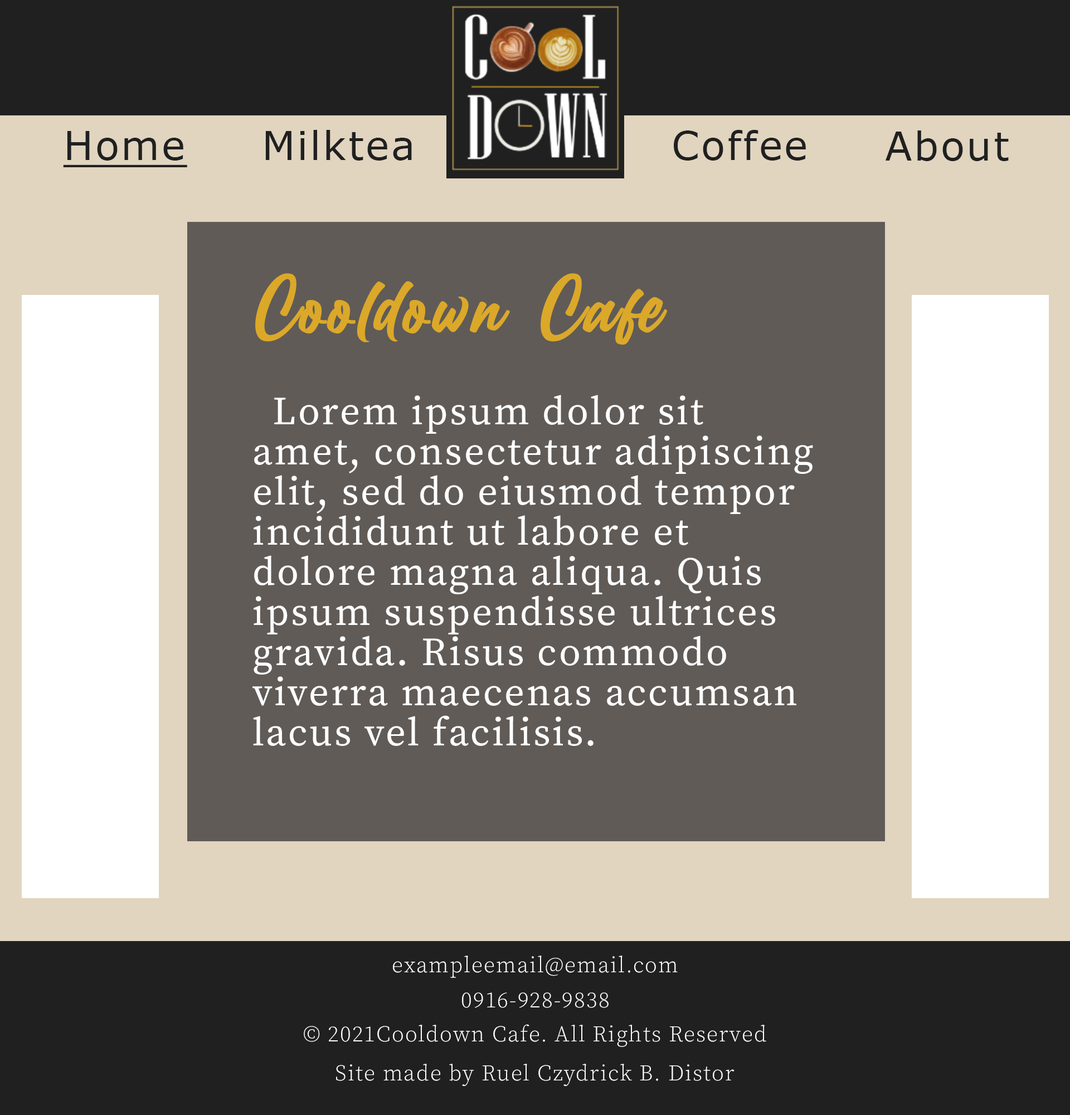
<style>
.page{position:relative;width:1070px;height:1115px;background:#605b57}
.page>*{position:absolute;margin:0}
.t1{font:39.6px "MSReferenceSansSerif";letter-spacing:0.05em;color:#202020;text-decoration:underline}
.t2{font:39.6px "MSReferenceSansSerif";letter-spacing:0.05em;color:#202020}
.t3{font:83.6px "BillionDreams";letter-spacing:0.05em;color:#dba829}
.t4{font:39.6px/40.1px "SourceSerifRoman-Regular";letter-spacing:0.05em;color:#ffffff}
.t5{font:22.3px "SourceSerifRoman-Light";letter-spacing:0.05em;color:#fefefe}
</style>
<div class="page">
<p class="t1" style="left:63px;top:131px;width:124px;height:36px">Home</p>
<p class="t2" style="left:265px;top:130px;width:147px;height:30px">Milktea</p>
<p class="t2" style="left:674px;top:130px;width:132px;height:30px">Coffee</p>
<p class="t2" style="left:885px;top:130px;width:124px;height:31px">About</p>
<p class="t3" style="left:255px;top:273px;width:413px;height:72px">Cooldown Cafe</p>
<p class="t4" style="left:252px;top:395px;width:561px;height:351px">Lorem ipsum dolor sit amet, consectetur adipiscing elit, sed do eiusmod tempor incididunt ut labore et dolore magna aliqua. Quis ipsum suspendisse ultrices gravida. Risus commodo viverra maecenas accumsan lacus vel facilisis.</p>
<p class="t5" style="left:393px;top:955px;width:285px;height:22px">exampleemail@email.com</p>
<p class="t5" style="left:462px;top:992px;width:147px;height:16px">0916-928-9838</p>
<p class="t5" style="left:304px;top:1024px;width:462px;height:23px">© 2021Cooldown Cafe. All Rights Reserved</p>
<p class="t5" style="left:336px;top:1063px;width:398px;height:23px">Site made by Ruel Czydrick B. Distor</p>
</div>
